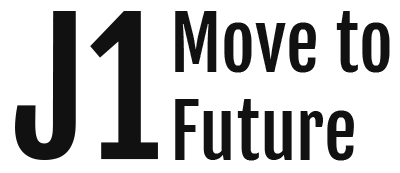
<style>
.page{position:relative;width:400px;height:173px;background:#ffffff}
.page>*{position:absolute;margin:0}
.t1{font:177.8px "FjallaOne-Regular";color:#000000}
.t2{font:73.1px/87.7px "FjallaOne-Regular";color:#000000}
</style>
<div class="page">
<p class="t1" style="left:15px;top:11px;width:143px;height:149px">J1</p>
<p class="t2" style="left:175px;top:11px;width:215px;height:150px;text-align:justify">Move to<br>Future</p>
</div>
